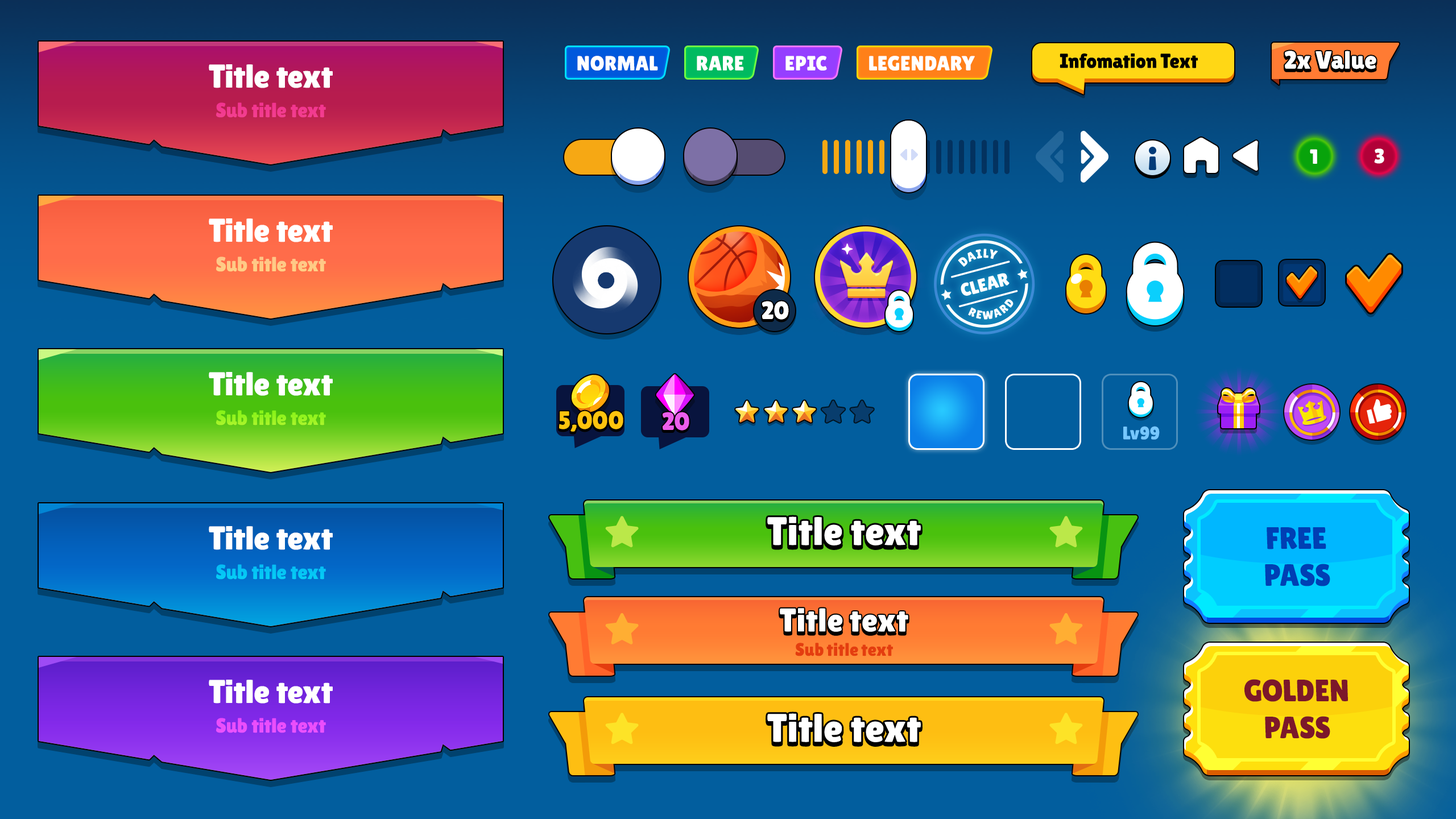
<style>
.page{position:relative;width:1456px;height:819px;background:#025e9e}
.page>*{position:absolute;margin:0}
.t1{font:20.5px "LilitaOne";letter-spacing:-0.01em;color:#000000}
.t2{font:25px "LilitaOne";color:#ffffff}
.t3{font:33px "LilitaOne";color:#ffffff}
.t4{font:20.5px "LilitaOne";color:#ffffff;text-transform:uppercase}
.t5{font:20.5px "LilitaOne";color:#f2398f}
.t6{font:20.5px "LilitaOne";color:#ffcb85}
.t7{font:12.7px "LilitaOne";letter-spacing:0.02em;color:#ffffff;text-transform:uppercase}
.t8{font:18.2px "LilitaOne";color:#ffffff;text-transform:uppercase}
.t9{font:11.6px "LilitaOne";letter-spacing:0.15em;color:#ffffff;text-transform:uppercase}
.t10{font:20.5px "LilitaOne";color:#9af421}
.t11{font:25px "LilitaOne";color:#ffc40e;text-transform:uppercase}
.t12{font:25px "LilitaOne";color:#ec5eec;text-transform:uppercase}
.t13{font:18.2px "LilitaOne";color:#76c7ff}
.t14{font:39.8px "LilitaOne";color:#ffffff}
.t15{font:30.9px "LilitaOne";color:#003fb4;text-transform:uppercase}
.t16{font:20.5px "LilitaOne";color:#05c5f5}
.t17{font:18.2px "LilitaOne";letter-spacing:-0.025em;color:#e43d0f}
.t18{font:30.9px "LilitaOne";color:#7c182a;text-transform:uppercase}
.t19{font:20.5px "LilitaOne";color:#ea4ffb}
</style>
<div class="page">
<p class="t1" style="left:1060px;top:53px;width:138px;height:15px">Infomation Text</p>
<p class="t2" style="left:1285px;top:51px;width:91px;height:18px">2x Value</p>
<p class="t3" style="left:209px;top:64px;width:124px;height:24px">Title text</p>
<p class="t4" style="left:577px;top:56px;width:81px;height:15px">Normal</p>
<p class="t4" style="left:697px;top:56px;width:47px;height:15px">Rare</p>
<p class="t4" style="left:785px;top:56px;width:42px;height:15px">Epic</p>
<p class="t4" style="left:869px;top:56px;width:106px;height:15px">Legendary</p>
<p class="t5" style="left:216px;top:102px;width:110px;height:16px">Sub title text</p>
<p class="t4" style="left:1310px;top:149px;width:7px;height:15px">1</p>
<p class="t4" style="left:1374px;top:148px;width:10px;height:16px">3</p>
<p class="t3" style="left:209px;top:218px;width:124px;height:24px">Title text</p>
<p class="t6" style="left:216px;top:257px;width:110px;height:15px">Sub title text</p>
<p class="t7" style="left:958px;top:249px;width:40px;height:18px;rotate:-14deg">daily</p>
<p class="t8" style="left:961px;top:273px;width:49px;height:23px;rotate:-15deg">clear</p>
<p class="t2" style="left:762px;top:301px;width:27px;height:19px">20</p>
<p class="t9" style="left:968px;top:299px;width:45px;height:21px;rotate:-14deg">reward</p>
<p class="t3" style="left:209px;top:372px;width:124px;height:24px">Title text</p>
<p class="t10" style="left:216px;top:410px;width:110px;height:15px">Sub title text</p>
<p class="t11" style="left:559px;top:411px;width:64px;height:21px">5,000</p>
<p class="t12" style="left:663px;top:412px;width:26px;height:19px">20</p>
<p class="t13" style="left:1123px;top:426px;width:37px;height:14px">Lv99</p>
<p class="t14" style="left:767px;top:516px;width:154px;height:29px">Title text</p>
<p class="t3" style="left:209px;top:526px;width:124px;height:24px">Title text</p>
<p class="t15" style="left:1265px;top:527px;width:65px;height:59px;text-align:center">Free<br>pass</p>
<p class="t16" style="left:216px;top:564px;width:110px;height:16px">Sub title text</p>
<p class="t3" style="left:780px;top:608px;width:128px;height:24px">Title text</p>
<p class="t17" style="left:795px;top:643px;width:98px;height:13px">Sub title text</p>
<p class="t3" style="left:209px;top:680px;width:124px;height:24px">Title text</p>
<p class="t18" style="left:1244px;top:679px;width:104px;height:60px;text-align:center">Golden<br>pass</p>
<p class="t14" style="left:767px;top:713px;width:154px;height:29px">Title text</p>
<p class="t19" style="left:216px;top:718px;width:110px;height:15px">Sub title text</p>
</div>
